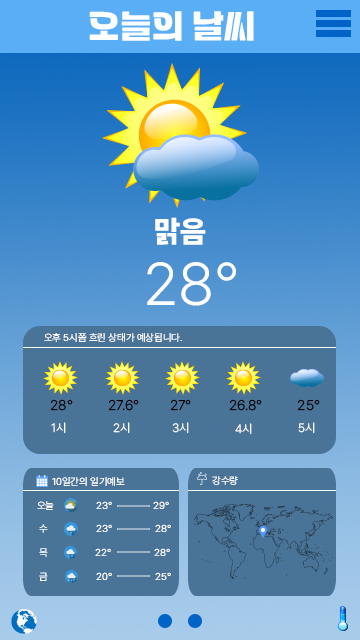
<style>
.page{position:relative;width:360px;height:640px;background:#497397}
.page>*{position:absolute;margin:0}
.t1{font:36px "Tenada";color:#fdfeff}
.t2{font:30px "Pretendard-Black";color:#ffffff}
.t3{font:60px "Pretendard-Light";color:#ffffff}
.t4{font:10px "Pretendard-Light";color:#ffffff}
.t5{font:14px "Pretendard-Light";color:#010000}
.t6{font:12px "Pretendard-Light";color:#ffffff}
</style>
<div class="page">
<p class="t1" style="left:89px;top:11px;width:165px;height:30px">오늘의 날씨</p>
<p class="t2" style="left:155px;top:217px;width:51px;height:28px">맑음</p>
<p class="t3" style="left:147px;top:262px;width:89px;height:44px">28°</p>
<p class="t4" style="left:44px;top:333px;width:138px;height:9px">오후 5시쯤 흐린 상태가 예상됩니다.</p>
<p class="t5" style="left:50px;top:399px;width:23px;height:12px">28°</p>
<p class="t5" style="left:108px;top:399px;width:31px;height:12px">27.6°</p>
<p class="t5" style="left:170px;top:399px;width:21px;height:12px">27°</p>
<p class="t5" style="left:229px;top:399px;width:33px;height:12px">26.8°</p>
<p class="t5" style="left:297px;top:399px;width:23px;height:12px">25°</p>
<p class="t6" style="left:51px;top:422px;width:15px;height:11px">1시</p>
<p class="t6" style="left:113px;top:422px;width:17px;height:11px">2시</p>
<p class="t6" style="left:172px;top:422px;width:17px;height:11px">3시</p>
<p class="t6" style="left:235px;top:423px;width:17px;height:11px">4시</p>
<p class="t6" style="left:298px;top:422px;width:17px;height:11px">5시</p>
<p class="t4" style="left:52px;top:477px;width:73px;height:9px">10일간의 일기예보</p>
<p class="t4" style="left:212px;top:476px;width:26px;height:9px">강수량</p>
<p class="t4" style="left:37px;top:501px;width:17px;height:9px">오늘</p>
<p class="t4" style="left:96px;top:501px;width:16px;height:8px">23°</p>
<p class="t4" style="left:153px;top:501px;width:16px;height:8px">29°</p>
<p class="t4" style="left:39px;top:524px;width:9px;height:9px">수</p>
<p class="t4" style="left:96px;top:524px;width:16px;height:8px">23°</p>
<p class="t4" style="left:155px;top:524px;width:16px;height:8px">28°</p>
<p class="t4" style="left:39px;top:548px;width:9px;height:9px">목</p>
<p class="t4" style="left:95px;top:548px;width:16px;height:8px">22°</p>
<p class="t4" style="left:154px;top:548px;width:16px;height:8px">28°</p>
<p class="t4" style="left:39px;top:572px;width:9px;height:9px">금</p>
<p class="t4" style="left:96px;top:572px;width:16px;height:8px">20°</p>
<p class="t4" style="left:155px;top:572px;width:16px;height:8px">25°</p>
</div>
